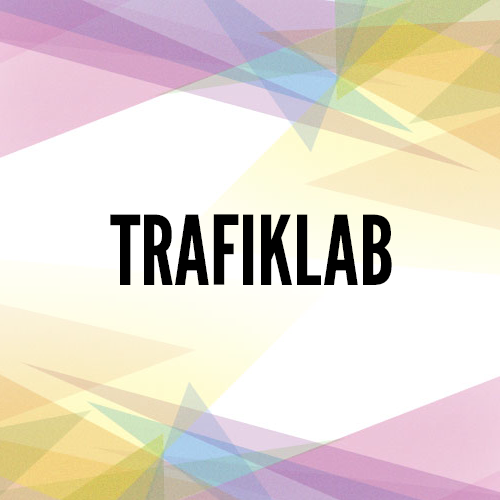
<style>
.page{position:relative;width:500px;height:500px;background:#ffffff}
.page>*{position:absolute;margin:0}
.t1{font:96px "LeagueGothic-Regular";color:#000000}
</style>
<div class="page">
<p class="t1" style="left:110px;top:214px;width:282px;height:71px">TRAFIKLAB</p>
</div>
